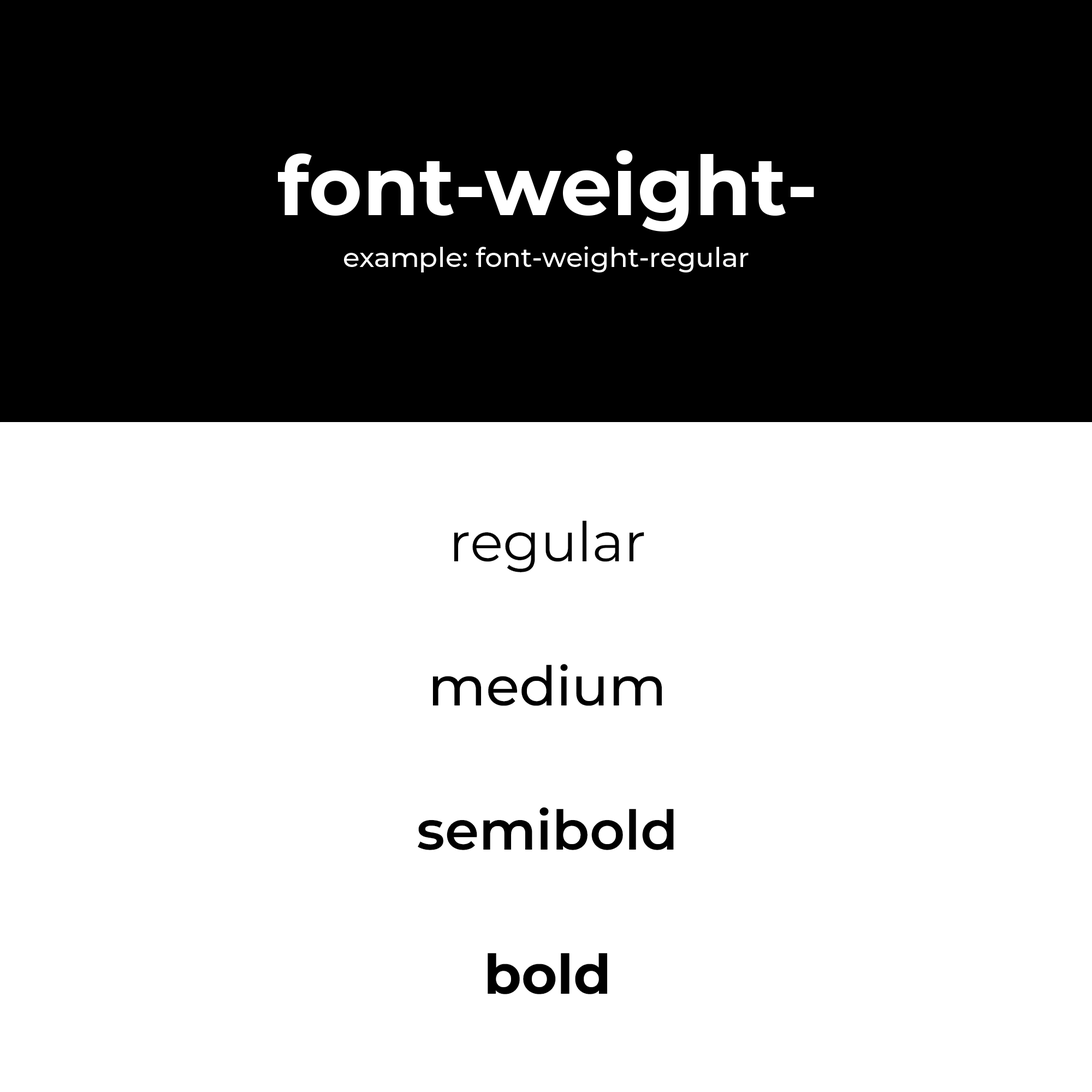
<style>
.page{position:relative;width:1092px;height:1092px;background:#ffffff}
.page>*{position:absolute;margin:0}
.t1{font:82.4px "Montserrat-Bold";color:#ffffff}
.t2{font:27.3px "Montserrat-Medium";color:#ffffff}
.t3{font:54.6px/144.2px "MontserratRoman-SemiBold";color:#000000}
.t4{font:54.6px/144.2px "MontserratRoman-Regular";color:#000000}
.t5{font:54.6px/144.2px "MontserratRoman-Medium";color:#000000}
.t6{font:54.6px/144.2px "MontserratRoman-Bold";color:#000000}
</style>
<div class="page">
<p class="t1" style="left:278px;top:150px;width:536px;height:82px">font-weight-</p>
<p class="t2" style="left:344px;top:246px;width:405px;height:26px">example: font-weight-regular</p>
<p class="t3" style="left:418px;top:520px;width:256px;height:474px;text-align:center"><span class="t4">regular<br></span><span class="t5">medium<br></span>semibold<br><span class="t6">bold</span></p>
</div>
